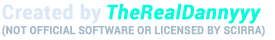
<style>
.page{position:relative;width:275px;height:40px;background:#ffffff}
.page>*{position:absolute;margin:0}
.t1{font:11px/15px "Roboto-Bold";color:#a5bac8;font-weight:bold;scale:0.94 1}
.t2{font:20px/15px "Roboto-Bold";letter-spacing:0.025em;color:#dae8f7;font-weight:bold;scale:0.94 1}
.t3{font:20px/15px "Roboto-Bold";letter-spacing:0.025em;color:#00ffda;font-weight:bold;font-style:italic;scale:0.94 1}
</style>
<div class="page">
<p class="t1" style="left:2px;top:3px;width:263px;height:34px"><span class="t2">Created by </span><span class="t3">TheRealDannyyy<br></span>(NOT OFFICIAL SOFTWARE OR LICENSED BY SCIRRA)</p>
</div>
